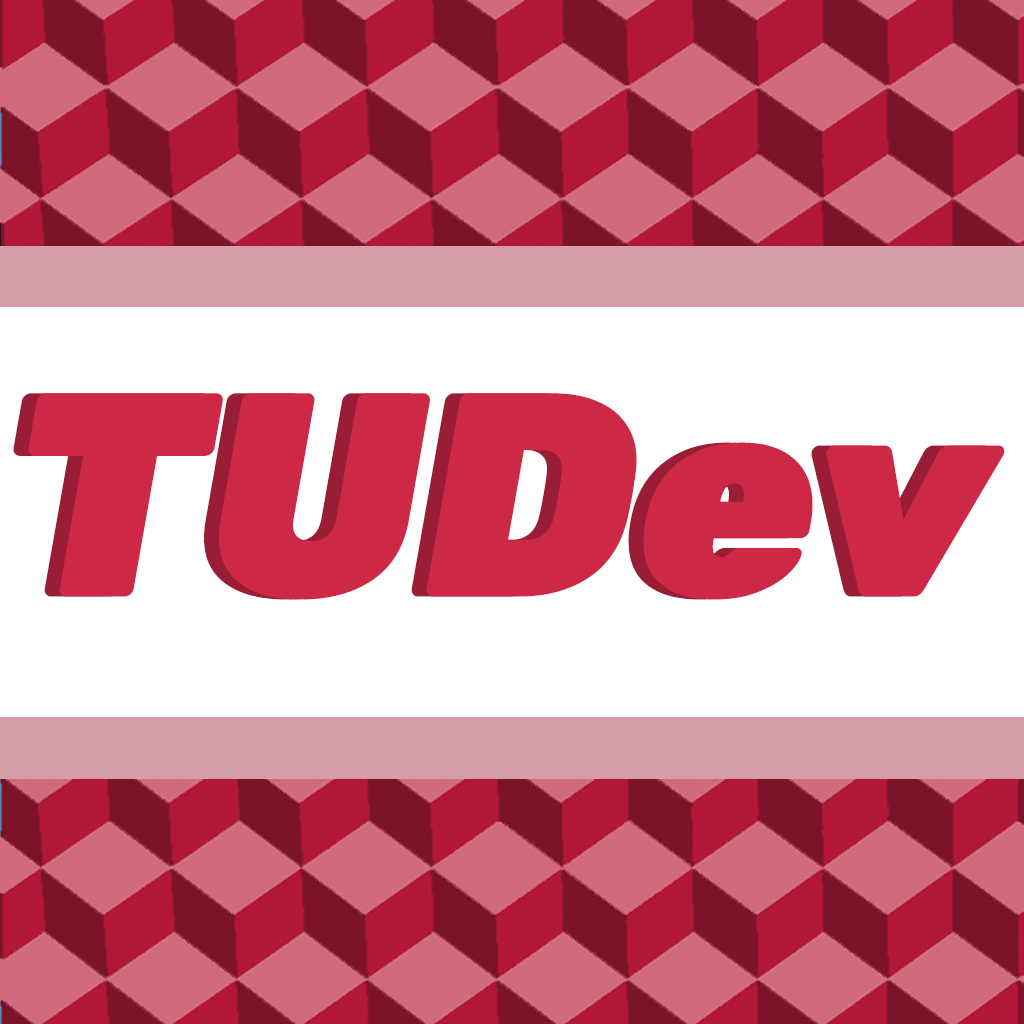
<style>
.page{position:relative;width:1024px;height:1024px;background:#ffffff}
.page>*{position:absolute;margin:0}
.t1{font:290.1px "Rubik-Black";color:#cd2846;font-style:italic}
</style>
<div class="page">
<p class="t1" style="left:13px;top:393px;width:977px;height:207px">TUDev</p>
<p class="t1" style="left:28px;top:393px;width:977px;height:207px">TUDev</p>
</div>
